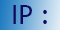
<style>
.page{position:relative;width:60px;height:30px}
.page>*{position:absolute;margin:0}
.t1{font:26px "TrebuchetMS";color:#100964}
</style>
<div class="page">
<p class="t1" style="left:13px;top:5px;width:34px;height:19px">IP :</p>
</div>
